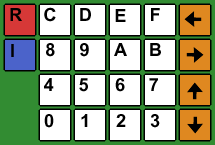
<style>
.page{position:relative;width:215px;height:145px;background:#ffffff}
.page>*{position:absolute;margin:0}
.t1{font:18px "Arial-BoldMT";color:#000000}
</style>
<div class="page">
<p class="t1" style="left:10px;top:8px;width:12px;height:13px">R</p>
<p class="t1" style="left:44px;top:7px;width:12px;height:15px">C</p>
<p class="t1" style="left:80px;top:8px;width:11px;height:13px">D</p>
<p class="t1" style="left:115px;top:9px;width:11px;height:13px">E</p>
<p class="t1" style="left:151px;top:8px;width:9px;height:13px">F</p>
<p class="t1" style="left:11px;top:44px;width:3px;height:13px">I</p>
<p class="t1" style="left:46px;top:43px;width:9px;height:14px">8</p>
<p class="t1" style="left:80px;top:43px;width:9px;height:14px">9</p>
<p class="t1" style="left:114px;top:43px;width:13px;height:13px">A</p>
<p class="t1" style="left:150px;top:43px;width:11px;height:13px">B</p>
<p class="t1" style="left:44px;top:78px;width:10px;height:13px">4</p>
<p class="t1" style="left:79px;top:78px;width:9px;height:14px">5</p>
<p class="t1" style="left:115px;top:78px;width:10px;height:14px">6</p>
<p class="t1" style="left:149px;top:78px;width:9px;height:13px">7</p>
<p class="t1" style="left:44px;top:114px;width:10px;height:14px">0</p>
<p class="t1" style="left:81px;top:114px;width:7px;height:13px">1</p>
<p class="t1" style="left:116px;top:114px;width:10px;height:13px">2</p>
<p class="t1" style="left:150px;top:114px;width:10px;height:14px">3</p>
</div>
